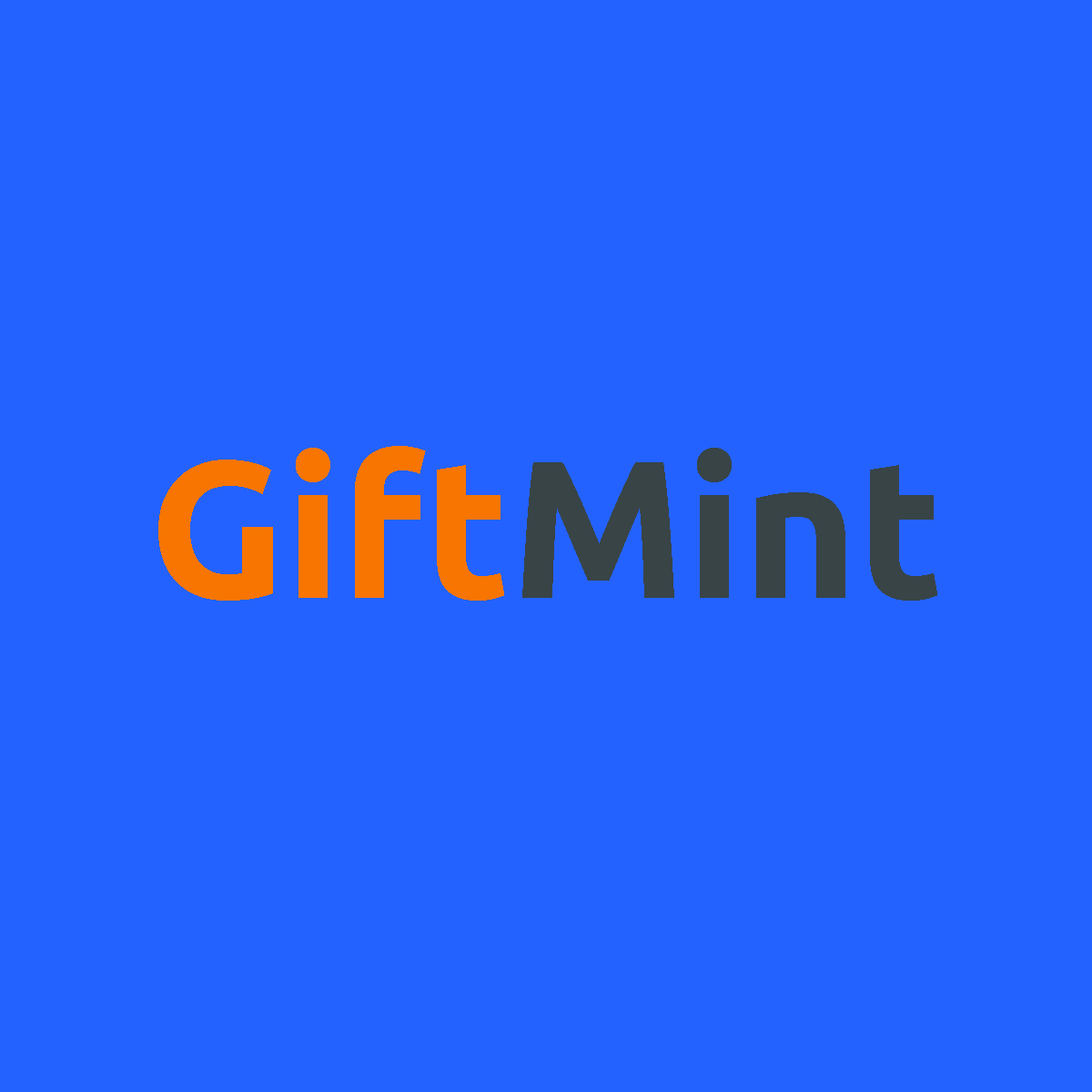
<style>
.page{position:relative;width:1092px;height:1092px;background:#2462ff}
.page>*{position:absolute;margin:0}
.t1{font:195.2px "Ubuntu-Bold";color:#f77500}
.t2{font:195.2px "Ubuntu-Bold";color:#384446}
</style>
<div class="page">
<p class="t1" style="left:158px;top:446px;width:779px;height:155px">Gift<span class="t2">Mint</span></p>
</div>
